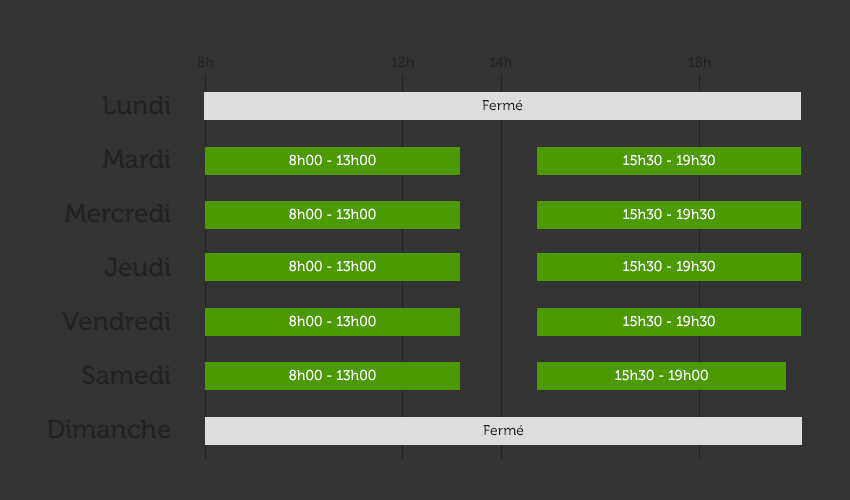
<style>
.page{position:relative;width:850px;height:500px;background:#333333}
.page>*{position:absolute;margin:0}
.t1{font:14px "Museo-500";color:#222222}
.t2{font:26px/54px "Museo-500";color:#222222}
.t3{font:14px "Museo-500";color:#ffffff}
</style>
<div class="page">
<p class="t1" style="left:198px;top:56px;width:16px;height:12px">8h</p>
<p class="t1" style="left:391px;top:56px;width:23px;height:11px">12h</p>
<p class="t1" style="left:490px;top:57px;width:22px;height:10px">14h</p>
<p class="t1" style="left:688px;top:56px;width:23px;height:12px">18h</p>
<p class="t2" style="left:47px;top:95px;width:124px;height:344px;text-align:right">Lundi<br>Mardi<br>Mercredi<br>Jeudi<br>Vendredi<br>Samedi<br>Dimanche</p>
<p class="t1" style="left:482px;top:100px;width:41px;height:11px">Fermé</p>
<p class="t3" style="left:289px;top:154px;width:87px;height:12px">8h00 - 13h00</p>
<p class="t3" style="left:623px;top:154px;width:92px;height:12px">15h30 - 19h30</p>
<p class="t3" style="left:289px;top:208px;width:87px;height:12px">8h00 - 13h00</p>
<p class="t3" style="left:623px;top:208px;width:92px;height:12px">15h30 - 19h30</p>
<p class="t3" style="left:289px;top:260px;width:87px;height:12px">8h00 - 13h00</p>
<p class="t3" style="left:623px;top:260px;width:92px;height:12px">15h30 - 19h30</p>
<p class="t3" style="left:289px;top:315px;width:87px;height:12px">8h00 - 13h00</p>
<p class="t3" style="left:623px;top:315px;width:92px;height:12px">15h30 - 19h30</p>
<p class="t3" style="left:289px;top:369px;width:87px;height:12px">8h00 - 13h00</p>
<p class="t3" style="left:615px;top:369px;width:93px;height:12px">15h30 - 19h00</p>
<p class="t1" style="left:483px;top:425px;width:41px;height:11px">Fermé</p>
</div>
